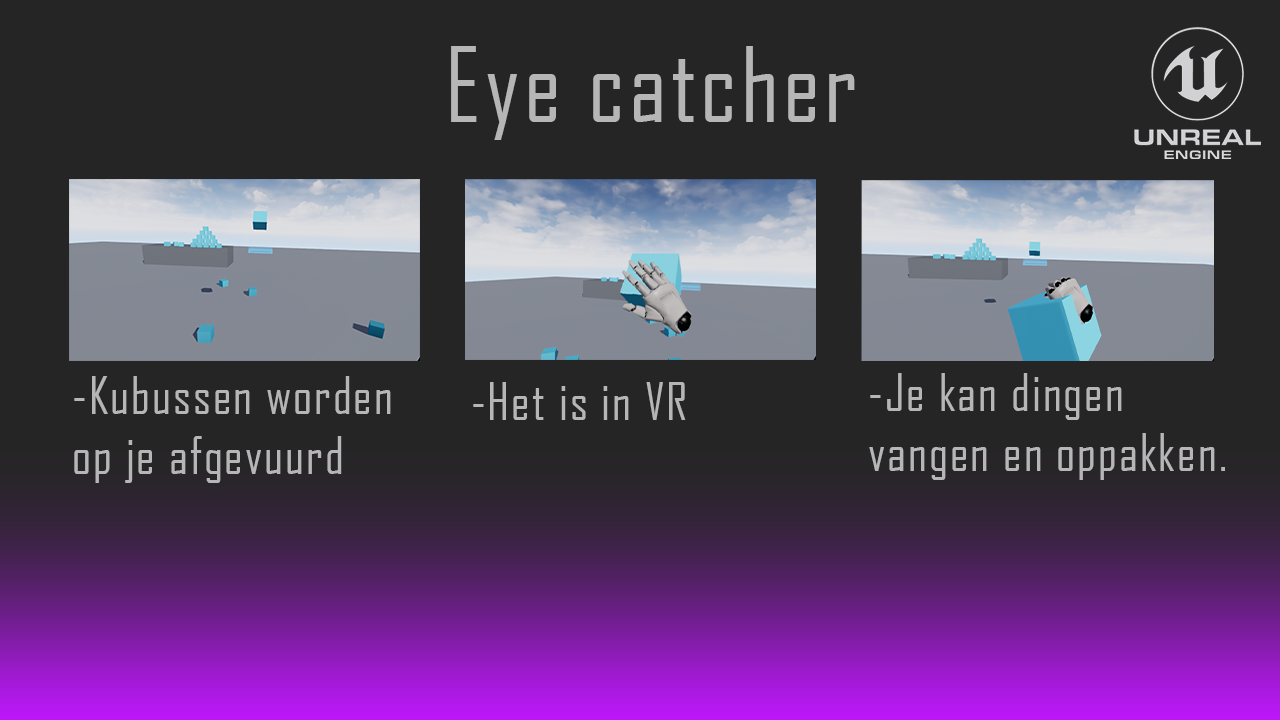
<style>
.page{position:relative;width:1280px;height:720px;background:#252525}
.page>*{position:absolute;margin:0}
.t1{font:100px "AgencyFB-Reg";letter-spacing:0.04em;color:#b6b6b6}
.t2{font:50px "AgencyFB-Reg";letter-spacing:0.04em;color:#b6b6b6}
</style>
<div class="page">
<p class="t1" style="left:451px;top:46px;width:404px;height:94px">Eye catcher</p>
<p class="t2" style="left:74px;top:376px;width:317px;height:107px">-Kubussen worden<br>op je afgevuurd</p>
<p class="t2" style="left:869px;top:373px;width:356px;height:107px">-Je kan dingen<br>vangen en oppakken.</p>
<p class="t2" style="left:473px;top:382px;width:213px;height:38px">-Het is in VR</p>
</div>
